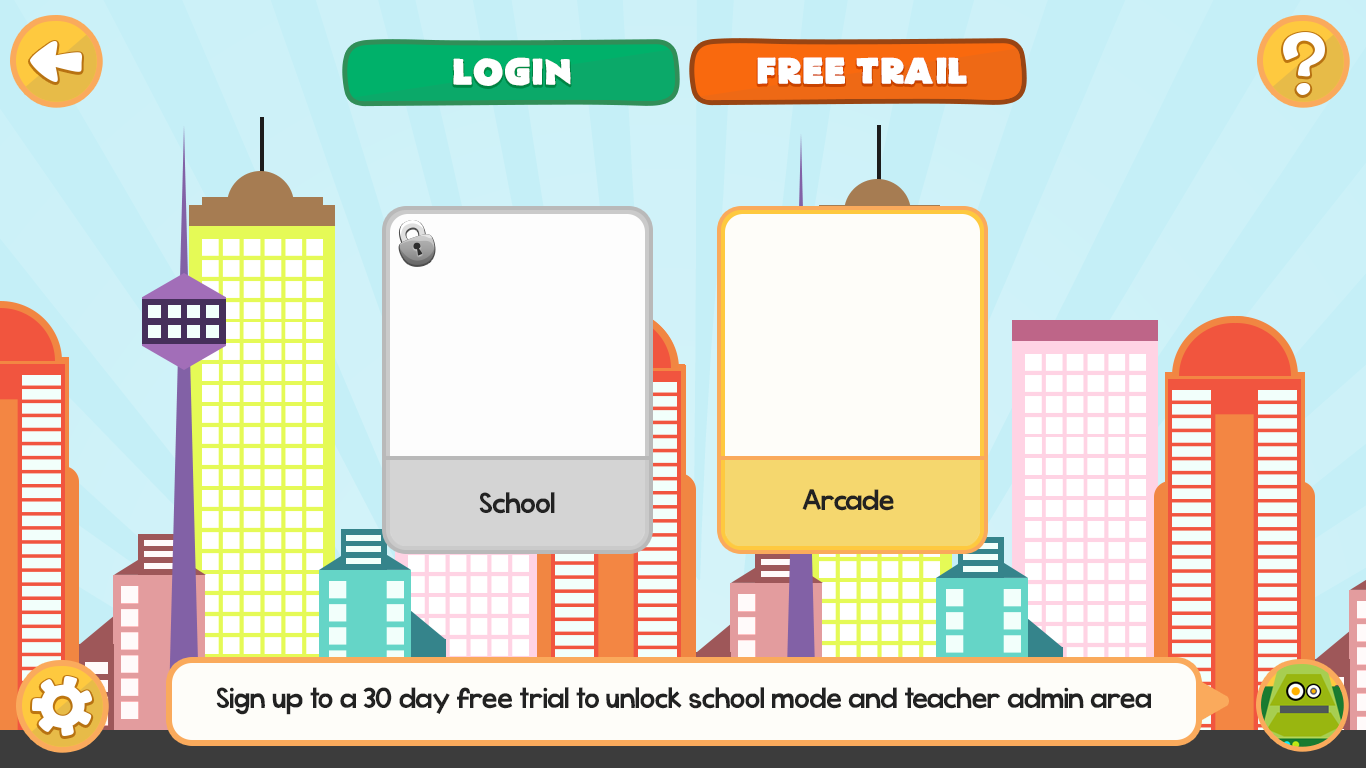
<style>
.page{position:relative;width:1366px;height:768px}
.page>*{position:absolute;margin:0}
.t1{font:36px "FlatBread";color:#ffffff}
.t2{font:30px "KGWhattheTeacherWants";color:#222222}
</style>
<div class="page">
<p class="t1" style="left:453px;top:57px;width:118px;height:29px">Login</p>
<p class="t1" style="left:757px;top:57px;width:210px;height:28px">Free Trail</p>
<p class="t2" style="left:479px;top:492px;width:76px;height:22px">School</p>
<p class="t2" style="left:802px;top:489px;width:92px;height:22px">Arcade</p>
<p class="t2" style="left:216px;top:687px;width:935px;height:28px">Sign up to a 30 day free trial to unlock school mode and teacher admin area</p>
</div>
